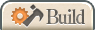
<style>
.page{position:relative;width:95px;height:30px}
.page>*{position:absolute;margin:0}
.t1{font:20px "RyuminPro-ExBold";letter-spacing:-0.08em;color:#6b6761;scale:0.9 1}
</style>
<div class="page">
<p class="t1" style="left:46px;top:9px;width:39px;height:15px">Build</p>
</div>
